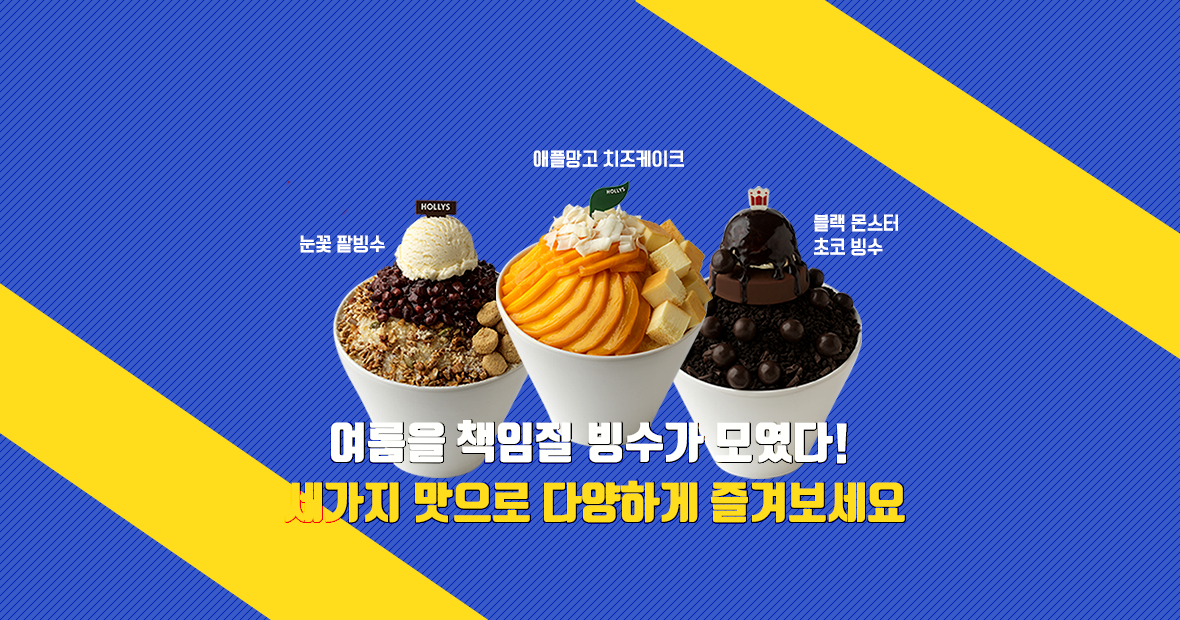
<style>
.page{position:relative;width:1180px;height:620px;background:#395ac7}
.page>*{position:absolute;margin:0}
.t1{font:18px "TTManbalchungchunR";letter-spacing:0.005em;color:#ffffff}
.t2{font:18px/24px "TTManbalchungchunR";letter-spacing:0.005em;color:#ffffff}
.t3{font:43px/60px "TmonMonsoriBlack";letter-spacing:0.005em;color:#ffdc1c}
.t4{font:43px/60px "TmonMonsoriBlack";letter-spacing:0.005em;color:#fffffe}
</style>
<div class="page">
<p class="t1" style="left:533px;top:149px;width:151px;height:19px">애플망고 치즈케이크</p>
<p class="t2" style="left:814px;top:214px;width:84px;height:42px">블랙 몬스터 <br>초코 빙수</p>
<p class="t1" style="left:300px;top:235px;width:85px;height:18px">눈꽃 팥빙수</p>
<p class="t3" style="left:285px;top:420px;width:620px;height:103px;text-align:center"><span class="t4">여름을 책임질 빙수가 모였다! <br></span>세가지 맛으로 다양하게 즐겨보세요</p>
</div>
